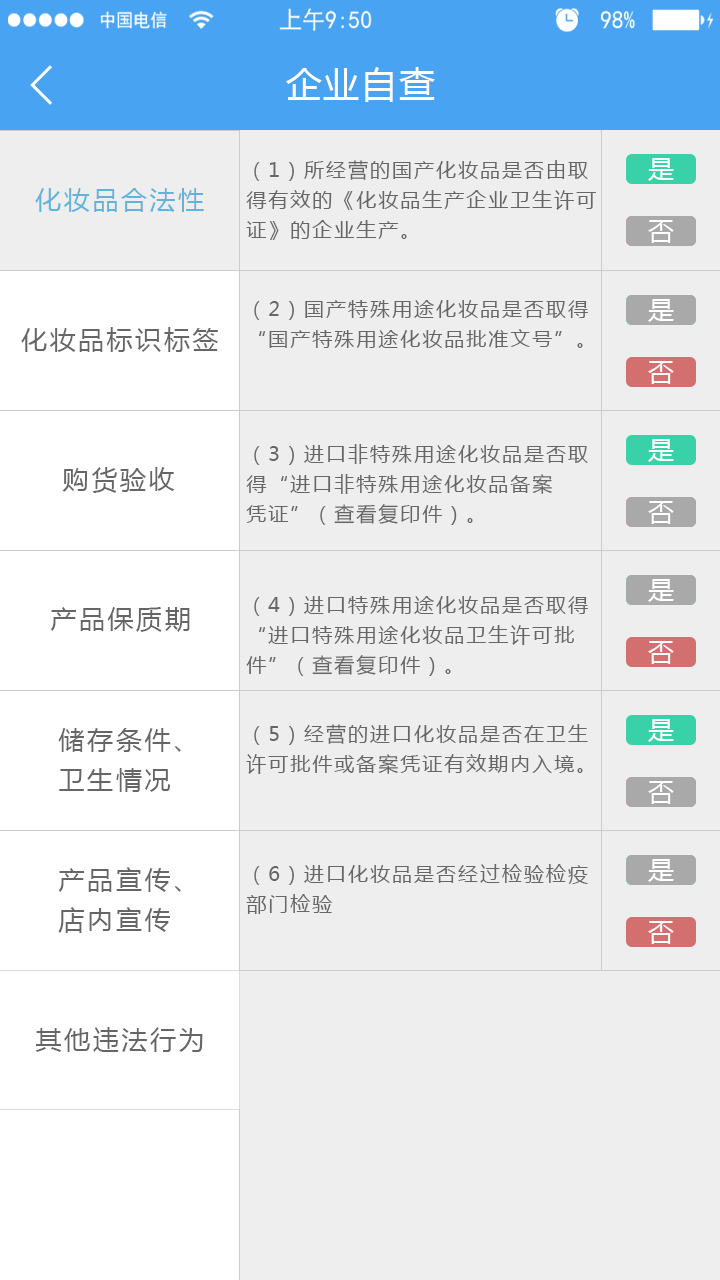
<style>
.page{position:relative;width:720px;height:1280px;background:#eeeeee}
.page>*{position:absolute;margin:0}
.t1{font:36px "MicrosoftYaHei";letter-spacing:0.05em;color:#ffffff}
.t2{font:20px/30px "MicrosoftYaHei";letter-spacing:0.1em;color:#666666}
.t3{font:26px "MicrosoftYaHei";letter-spacing:0.1em;color:#ffffff}
.t4{font:26px "MicrosoftYaHei";letter-spacing:0.1em;color:#60b4dc}
.t5{font:26px "MicrosoftYaHei";letter-spacing:0.1em;color:#666666}
.t6{font:26px/40px "MicrosoftYaHei";letter-spacing:0.1em;color:#666666}
</style>
<div class="page">
<p class="t1" style="left:286px;top:67px;width:149px;height:35px">企业自查</p>
<p class="t2" style="left:246px;top:160px;width:350px;height:80px">（1）所经营的国产化妆品是否由取<br>得有效的《化妆品生产企业卫生许可<br>证》的企业生产。</p>
<p class="t3" style="left:648px;top:158px;width:26px;height:23px">是</p>
<p class="t4" style="left:35px;top:188px;width:169px;height:24px">化妆品合法性</p>
<p class="t3" style="left:648px;top:220px;width:26px;height:23px">否</p>
<p class="t2" style="left:254px;top:300px;width:334px;height:48px">（2）国产特殊用途化妆品是否取得<br>“国产特殊用途化妆品批准文号”。</p>
<p class="t3" style="left:648px;top:299px;width:26px;height:23px">是</p>
<p class="t5" style="left:21px;top:327px;width:197px;height:25px">化妆品标识标签</p>
<p class="t3" style="left:648px;top:361px;width:26px;height:23px">否</p>
<p class="t2" style="left:246px;top:444px;width:342px;height:81px">（3）进口非特殊用途化妆品是否取<br>得“进口非特殊用途化妆品备案<br>凭证”（查看复印件）。</p>
<p class="t3" style="left:648px;top:439px;width:26px;height:23px">是</p>
<p class="t5" style="left:62px;top:467px;width:113px;height:26px">购货验收</p>
<p class="t3" style="left:648px;top:501px;width:26px;height:23px">否</p>
<p class="t3" style="left:648px;top:579px;width:26px;height:23px">是</p>
<p class="t2" style="left:246px;top:596px;width:342px;height:80px">（4）进口特殊用途化妆品是否取得<br>“进口特殊用途化妆品卫生许可批<br>件”（查看复印件）。</p>
<p class="t5" style="left:50px;top:607px;width:140px;height:25px">产品保质期</p>
<p class="t3" style="left:648px;top:641px;width:26px;height:23px">否</p>
<p class="t2" style="left:246px;top:724px;width:342px;height:50px">（5）经营的进口化妆品是否在卫生<br>许可批件或备案凭证有效期内入境。</p>
<p class="t3" style="left:648px;top:719px;width:26px;height:23px">是</p>
<p class="t6" style="left:58px;top:728px;width:123px;height:64px">储存条件、<br>卫生情况</p>
<p class="t3" style="left:648px;top:781px;width:26px;height:23px">否</p>
<p class="t6" style="left:58px;top:867px;width:123px;height:66px">产品宣传、<br>店内宣传</p>
<p class="t2" style="left:246px;top:864px;width:342px;height:50px">（6）进口化妆品是否经过检验检疫<br>部门检验</p>
<p class="t3" style="left:648px;top:859px;width:26px;height:23px">是</p>
<p class="t3" style="left:648px;top:921px;width:26px;height:23px">否</p>
<p class="t5" style="left:35px;top:1027px;width:168px;height:25px">其他违法行为</p>
</div>
